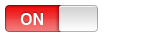
<style>
.page{position:relative;width:157px;height:37px;background:#ffffff}
.page>*{position:absolute;margin:0}
.t1{font:16px "Helvetica-Bold";color:#ffffff}
</style>
<div class="page">
<p class="t1" style="left:20px;top:13px;width:23px;height:12px">ON</p>
</div>
